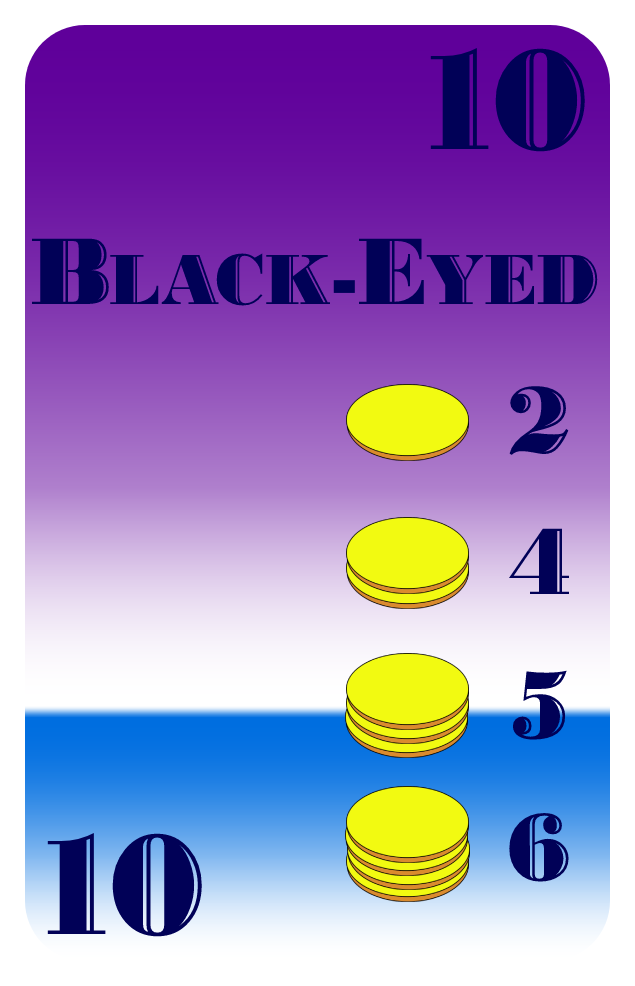
<style>
.page{position:relative;width:635px;height:986px}
.page>*{position:absolute;margin:0}
.t1{font:150px "BodoniHighlightICG";color:#010157}
.t2{font:75px "BodoniHighlightICG";color:#010157}
.t3{font:100px "BodoniHighlightICG";color:#010157}
</style>
<div class="page">
<p class="t1" style="left:430px;top:48px;width:155px;height:104px">10</p>
<p class="t2" style="left:31px;top:238px;width:567px;height:68px"><span class="t3">B</span>LACK-<span class="t3">E</span>YED</p>
<p class="t3" style="left:509px;top:386px;width:60px;height:69px">2</p>
<p class="t3" style="left:508px;top:528px;width:61px;height:66px">4</p>
<p class="t3" style="left:512px;top:670px;width:55px;height:70px">5</p>
<p class="t3" style="left:509px;top:813px;width:60px;height:69px">6</p>
<p class="t1" style="left:47px;top:833px;width:155px;height:104px">10</p>
</div>
